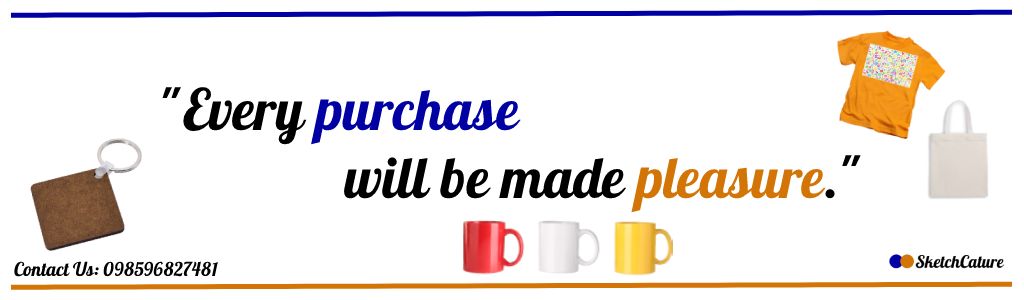
<style>
.page{position:relative;width:1024px;height:300px;background:#ffffff}
.page>*{position:absolute;margin:0}
.t1{font:57px "Galada-Regular";color:#000000}
.t2{font:57px "Galada-Regular";color:#0000a3}
.t3{font:57px "Galada-Regular";color:#d37506}
.t4{font:19px "Galada-Regular";color:#000000}
</style>
<div class="page">
<p class="t1" style="left:162px;top:87px;width:699px;height:126px">"Every <span class="t2">purchase <br>               </span>will be made <span class="t3">pleasure</span>."</p>
<p class="t4" style="left:14px;top:261px;width:204px;height:16px">Contact Us: 098596827481</p>
</div>
